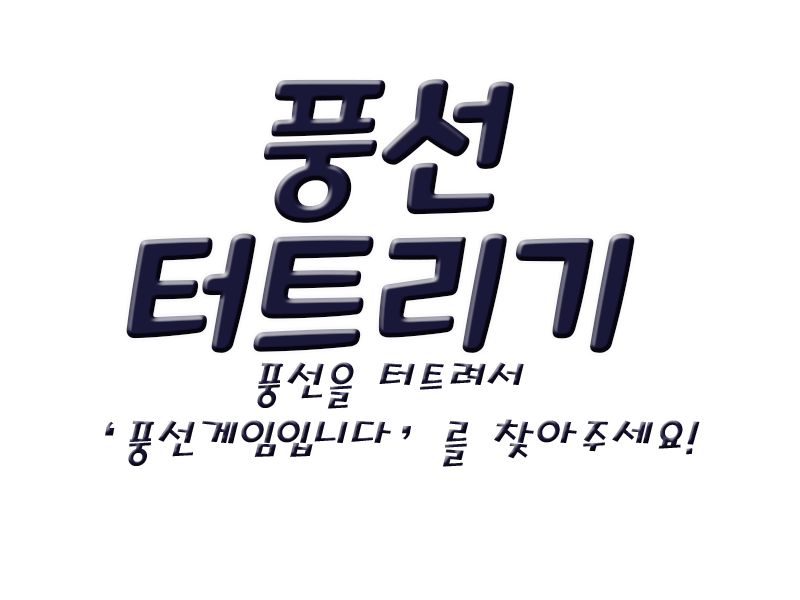
<style>
.page{position:relative;width:800px;height:600px;background:#ffffff}
.page>*{position:absolute;margin:0}
.t1{font:150px "MaplestoryBold";font-style:italic}
.t2{font:48px "MagicR-HM";font-style:italic}
</style>
<div class="page">
<p class="t1" style="left:263px;top:79px;width:251px;height:144px">풍선</p>
<p class="t1" style="left:126px;top:233px;width:509px;height:120px">터트리기</p>
<p class="t2" style="left:105px;top:362px;width:595px;height:105px;text-align:center">풍선을 터트려서<br>‘풍선게임입니다’를 찾아주세요!</p>
</div>
